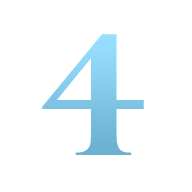
<style>
.page{position:relative;width:192px;height:192px;background:#ffffff}
.page>*{position:absolute;margin:0}
.t1{font:164.4px "PerpetuaTitlingMT-Bold";color:#7ec5e5}
</style>
<div class="page">
<p class="t1" style="left:42px;top:34px;width:102px;height:121px">4</p>
</div>
